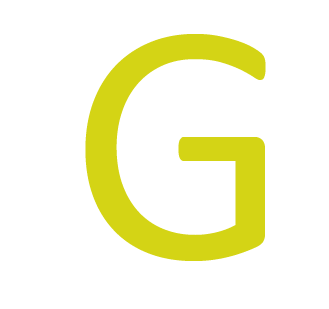
<style>
.page{position:relative;width:329px;height:309px;background:#ffffff}
.page>*{position:absolute;margin:0}
.t1{font:349.9px "Calibri";letter-spacing:0.01em;color:#d4d415}
</style>
<div class="page">
<p class="t1" style="left:85px;top:34px;width:181px;height:227px">G</p>
</div>
